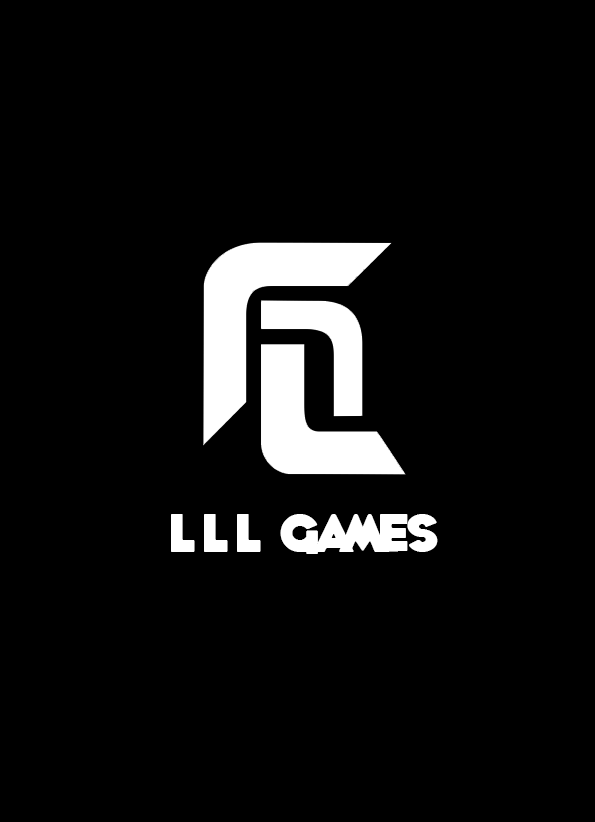
<style>
.page{position:relative;width:595px;height:822px;background:#000000}
.page>*{position:absolute;margin:0}
.t1{font:48px "WhoopAss";color:#ffffff}
</style>
<div class="page">
<p class="t1" style="left:171px;top:514px;width:267px;height:40px">L L l  Games</p>
</div>
